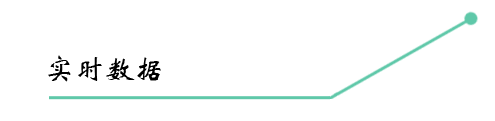
<style>
.page{position:relative;width:495px;height:121px;background:#ffffff}
.page>*{position:absolute;margin:0}
.t1{font:30px "STXinwei";color:#000000}
</style>
<div class="page">
<p class="t1" style="left:48px;top:55px;width:113px;height:27px">实时数据</p>
</div>
